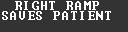
<style>
.page{position:relative;width:128px;height:32px;background:#333333}
.page>*{position:absolute;margin:0}
.t1{font:12px/9.7px "Terminal";letter-spacing:0.05em;color:#ffffff}
</style>
<div class="page">
<p class="t1" style="left:2px;top:1px;width:109px;height:19px;text-align:center">RIGHT RAMP<br>SAVES PATIENT</p>
</div>
